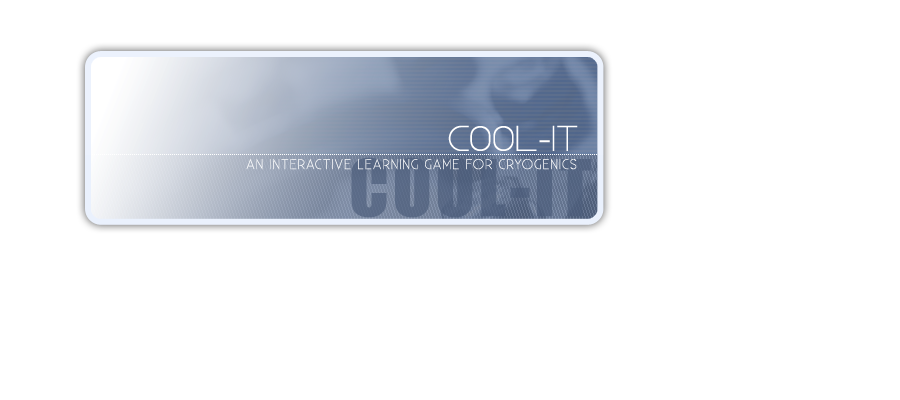
<style>
.page{position:relative;width:900px;height:400px;background:#ffffff}
.page>*{position:absolute;margin:0}
.t1{font:30px "Steiner";letter-spacing:0.05em;color:#ffffff;text-transform:uppercase}
.t2{font:14px "Existence-StencilLight";letter-spacing:0.05em;color:#ffffff;text-transform:uppercase}
.t3{font:72px "Impact";letter-spacing:0.05em;color:#4b5c7a;text-transform:uppercase}
</style>
<div class="page">
<p class="t1" style="left:448px;top:125px;width:130px;height:26px">Cool-It</p>
<p class="t2" style="left:246px;top:158px;width:331px;height:12px">an interactive learning Game for Cryogenics</p>
<p class="t3" style="left:351px;top:157px;width:241px;height:61px;opacity:0.68">Cool-It</p>
</div>
